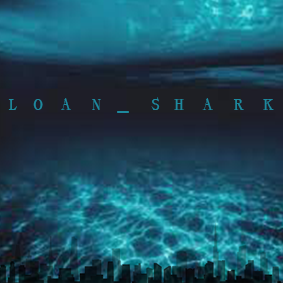
<style>
.page{position:relative;width:283px;height:283px}
.page>*{position:absolute;margin:0}
.t1{font:17px "Classica-Heavy-Regular";color:#1d899e;scale:0.71 1}
</style>
<div class="page">
<p class="t1" style="left:8px;top:97px;width:266px;height:16px">LOAN_SHARK</p>
</div>
